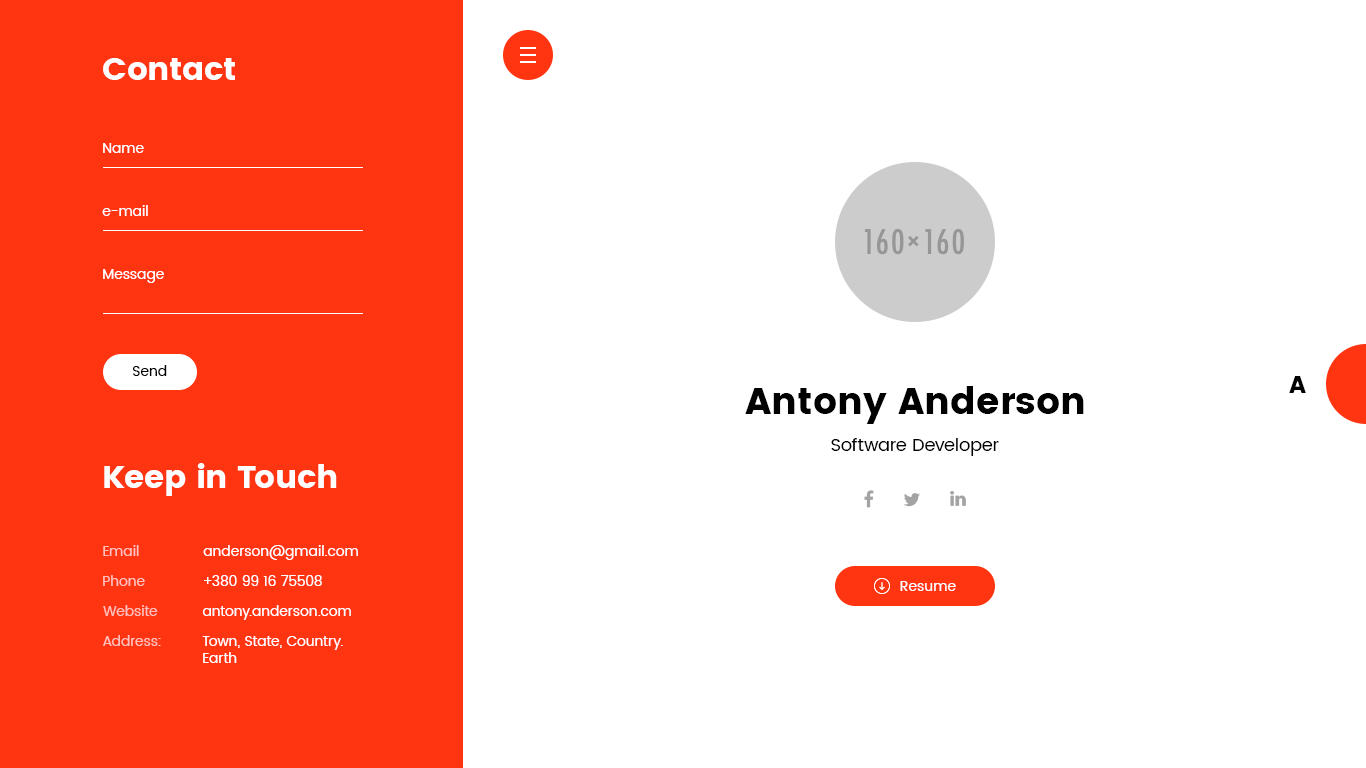
<style>
.page{position:relative;width:1366px;height:768px;background:#ffffff}
.page>*{position:absolute;margin:0}
.t1{font:32px "Poppins";color:#ffffff}
.t2{font:14px "Poppins-Regular";color:#ffffff}
.t3{font:14px "Poppins-Regular";color:#000000}
.t4{font:24px "Poppins";color:#000000}
.t5{font:37px "Poppins";color:#000000}
.t6{font:18px "Poppins-Regular";color:#000000}
.t7{font:14px "Poppins-Regular";color:#ffbfba}
</style>
<div class="page">
<p class="t1" style="left:103px;top:58px;width:132px;height:22px">Contact</p>
<p class="t2" style="left:103px;top:143px;width:41px;height:10px">Name</p>
<p class="t2" style="left:102px;top:205px;width:46px;height:11px">e-mail</p>
<p class="t2" style="left:103px;top:269px;width:61px;height:14px">Message</p>
<p class="t3" style="left:133px;top:365px;width:34px;height:11px">Send</p>
<p class="t4" style="left:1289px;top:376px;width:17px;height:17px">A</p>
<p class="t5" style="left:745px;top:386px;width:339px;height:38px">Antony Anderson</p>
<p class="t6" style="left:831px;top:438px;width:168px;height:18px">Software Developer</p>
<p class="t1" style="left:104px;top:463px;width:233px;height:33px">Keep in Touch</p>
<p class="t7" style="left:103px;top:545px;width:36px;height:11px">Email</p>
<p class="t2" style="left:203px;top:545px;width:155px;height:15px">anderson@gmail.com</p>
<p class="t7" style="left:103px;top:575px;width:42px;height:11px">Phone</p>
<p class="t2" style="left:204px;top:575px;width:118px;height:11px">+380 99 16 75508</p>
<p class="t2" style="left:900px;top:581px;width:56px;height:10px">Resume</p>
<p class="t7" style="left:103px;top:605px;width:55px;height:11px">Website</p>
<p class="t2" style="left:202px;top:605px;width:149px;height:15px">antony.anderson.com</p>
<p class="t7" style="left:103px;top:635px;width:58px;height:11px">Address:</p>
<p class="t2" style="left:202px;top:636px;width:141px;height:27px">Town, State, Country.<br>Earth</p>
</div>
